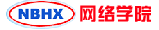
<style>
.page{position:relative;width:159px;height:30px;background:#ffffff}
.page>*{position:absolute;margin:0}
.t1{font:18px "FZZYJW--GB1-0";letter-spacing:0.02em;color:#ff0012}
</style>
<div class="page">
<p class="t1" style="left:80px;top:5px;width:71px;height:17px">网络学院</p>
</div>
